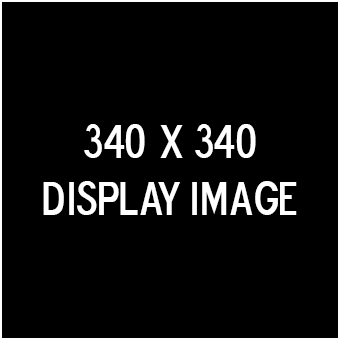
<style>
.page{position:relative;width:340px;height:340px;background:#000000}
.page>*{position:absolute;margin:0}
.t1{font:48px "BlueHighwayDType";color:#ffffff}
</style>
<div class="page">
<p class="t1" style="left:43px;top:124px;width:254px;height:91px;text-align:center">340 x 340<br>Display Image</p>
</div>
